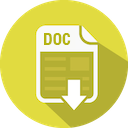
<style>
.page{position:relative;width:128px;height:128px;background:#e1db40}
.page>*{position:absolute;margin:0}
.t1{font:16px "UniversLT-CondensedBold";letter-spacing:-0.025em;color:#b4b30f}
</style>
<div class="page">
<p class="t1" style="left:44px;top:33px;width:27px;height:12px">DOC</p>
</div>
